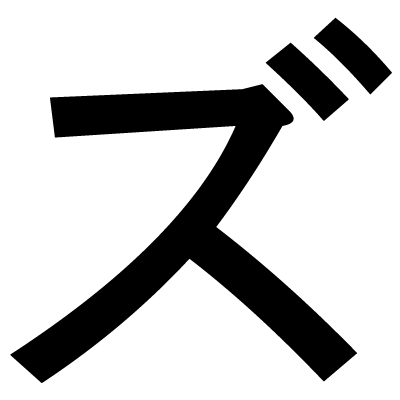
<style>
.page{position:relative;width:400px;height:400px;background:#ffffff}
.page>*{position:absolute;margin:0}
.t1{font:424.8px "MS-PGothic";color:#000000}
</style>
<div class="page">
<p class="t1" style="left:10px;top:17px;width:382px;height:366px">ズ</p>
</div>
